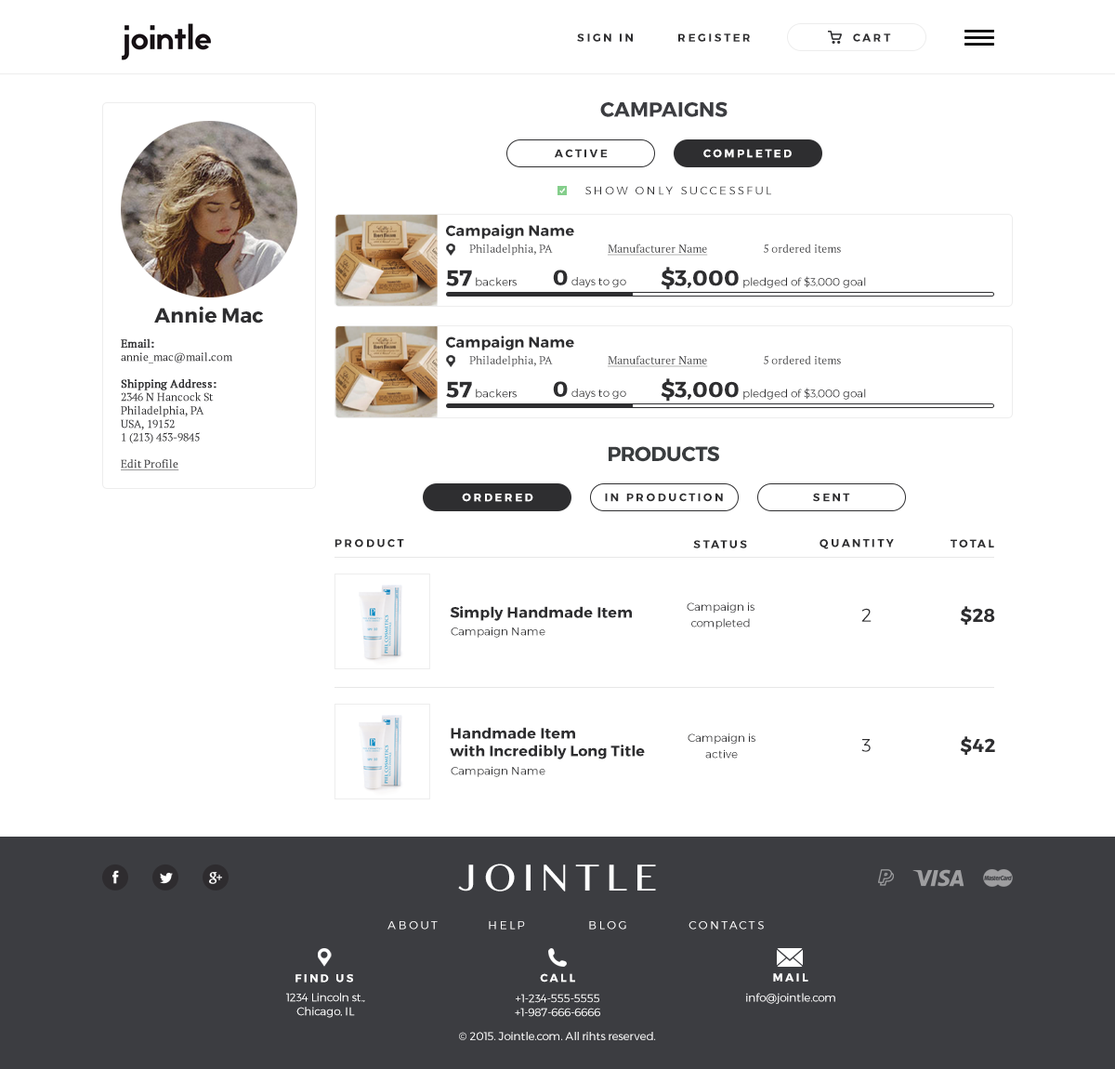
<style>
.page{position:relative;width:1115px;height:1069px;background:#ffffff}
.page>*{position:absolute;margin:0}
.t1{font:11.2px "Montserrat-Bold";letter-spacing:0.2em;color:#2e2e30}
.t2{font:20.5px "Montserrat-Bold";color:#3c3d41}
.t3{font:11.2px "Montserrat-Bold";letter-spacing:0.2em;color:#ffffff}
.t4{font:11.2px "Montserrat-Light";letter-spacing:0.2em;color:#2e2e30}
.t5{font:14.9px "Montserrat-Bold";color:#2e2e30}
.t6{font:11.2px "PTSerif-Regular";color:#2e2e30;text-decoration:underline}
.t7{font:11.2px "PTSerif-Regular";color:#2e2e30}
.t8{font:11.2px "Montserrat-Light";color:#2e2e30}
.t9{font:22.3px "Montserrat-Bold";color:#2e2e30}
.t10{font:20.5px "Montserrat-Bold";color:#2e2e30}
.t11{font:11.2px "PTSerif-Regular";color:#2e2e30;font-weight:bold}
.t12{font:20.5px "Montserrat-Bold";letter-spacing:-0.02em;color:#3a3d3f}
.t13{font:18.6px "Montserrat-Light";color:#2e2e30}
.t14{font:18.6px "Montserrat-Bold";color:#2e2e30}
.t15{font:14.9px/14.9px "Montserrat-Bold";color:#2e2e30}
.t16{font:33.5px "BanglaMN";letter-spacing:0.2em;color:#ffffff}
.t17{font:11.2px "Montserrat-Light";letter-spacing:0.2em;color:#ffffff}
.t18{font:11.2px/11.2px "Montserrat-Light";color:#ffffff}
.t19{font:11.2px "Montserrat-Light";color:#ffffff}
</style>
<div class="page">
<p class="t1" style="left:577px;top:33px;width:173px;height:9px">SIGN IN  REGISTER</p>
<p class="t1" style="left:853px;top:33px;width:38px;height:9px">CART</p>
<p class="t2" style="left:600px;top:101px;width:128px;height:16px">CAMPAIGNS</p>
<p class="t1" style="left:554px;top:149px;width:54px;height:9px">ACTIVE</p>
<p class="t3" style="left:704px;top:149px;width:88px;height:9px">COMPLETED</p>
<p class="t4" style="left:586px;top:186px;width:186px;height:9px">SHOW ONLY SUCCESSFUL</p>
<p class="t5" style="left:446px;top:224px;width:128px;height:15px">Campaign Name</p>
<p class="t6" style="left:469px;top:244px;width:372px;height:12px"><span class="t7">Philadelphia, PA                    </span>Manufacturer Name                    <span class="t7">5 ordered items</span></p>
<p class="t8" style="left:446px;top:270px;width:71px;height:16px"><span class="t9">57</span> backers</p>
<p class="t8" style="left:553px;top:270px;width:74px;height:18px"><span class="t9">0</span> days to go</p>
<p class="t8" style="left:661px;top:267px;width:205px;height:23px"><span class="t9">$3,000</span> pledged of $3,000 goal</p>
<p class="t10" style="left:154px;top:306px;width:110px;height:17px">Annie Mac</p>
<p class="t7" style="left:121px;top:338px;width:111px;height:132px"><span class="t11">Email:<br></span>annie_mac@mail.com<br><span class="t11"><br>Shipping Address:<br></span>2346 N Hancock St<br>Philadelphia, PA<br>USA, 19152<br>1 (213) 453-9845<br><br><span class="t6">Edit Profile</span></p>
<p class="t5" style="left:446px;top:336px;width:128px;height:14px">Campaign Name</p>
<p class="t6" style="left:469px;top:355px;width:372px;height:12px"><span class="t7">Philadelphia, PA                    </span>Manufacturer Name                    <span class="t7">5 ordered items</span></p>
<p class="t8" style="left:446px;top:381px;width:71px;height:17px"><span class="t9">57</span> backers</p>
<p class="t8" style="left:553px;top:381px;width:74px;height:19px"><span class="t9">0</span> days to go</p>
<p class="t8" style="left:661px;top:378px;width:205px;height:24px"><span class="t9">$3,000</span> pledged of $3,000 goal</p>
<p class="t12" style="left:609px;top:446px;width:110px;height:16px">PRODUCTS</p>
<p class="t3" style="left:462px;top:493px;width:72px;height:9px">ORDERED</p>
<p class="t1" style="left:605px;top:493px;width:118px;height:9px">IN PRODUCTION</p>
<p class="t1" style="left:813px;top:493px;width:38px;height:9px">SENT</p>
<p class="t1" style="left:335px;top:539px;width:69px;height:9px">PRODUCT</p>
<p class="t1" style="left:693px;top:540px;width:54px;height:8px">STATUS</p>
<p class="t1" style="left:820px;top:539px;width:74px;height:10px">QUANTITY</p>
<p class="t1" style="left:951px;top:539px;width:44px;height:9px">TOTAL</p>
<p class="t8" style="left:687px;top:602px;width:68px;height:27px;text-align:center">Campaign is<br>completed</p>
<p class="t5" style="left:450px;top:606px;width:182px;height:15px">Simply Handmade Item</p>
<p class="t13" style="left:862px;top:608px;width:10px;height:14px">2</p>
<p class="t14" style="left:960px;top:606px;width:36px;height:19px">$28</p>
<p class="t8" style="left:451px;top:627px;width:95px;height:11px">Campaign Name</p>
<p class="t15" style="left:450px;top:727px;width:195px;height:32px">Handmade Item<br>with Incredibly Long Title</p>
<p class="t8" style="left:688px;top:733px;width:68px;height:26px;text-align:center">Campaign is<br>active</p>
<p class="t14" style="left:960px;top:736px;width:36px;height:19px">$42</p>
<p class="t13" style="left:862px;top:739px;width:9px;height:13px">3</p>
<p class="t8" style="left:451px;top:766px;width:95px;height:11px">Campaign Name</p>
<p class="t16" style="left:458px;top:864px;width:198px;height:27px">JOINTLE</p>
<p class="t17" style="left:388px;top:921px;width:376px;height:9px">ABOUT  HELP  BLOG  CONTACTS</p>
<p class="t3" style="left:296px;top:974px;width:57px;height:9px">FIND US</p>
<p class="t3" style="left:540px;top:973px;width:35px;height:10px">CALL</p>
<p class="t3" style="left:773px;top:973px;width:36px;height:9px">MAIL</p>
<p class="t18" style="left:286px;top:993px;width:79px;height:25px;text-align:center">1234 Lincoln st.,<br>Chicago, IL</p>
<p class="t18" style="left:515px;top:994px;width:85px;height:23px;text-align:center">+1-234-555-5555<br>+1-987-666-6666</p>
<p class="t19" style="left:746px;top:993px;width:90px;height:11px">info@jointle.com</p>
<p class="t19" style="left:459px;top:1032px;width:197px;height:8px">© 2015. Jointle.com. All rihts reserved.</p>
</div>
